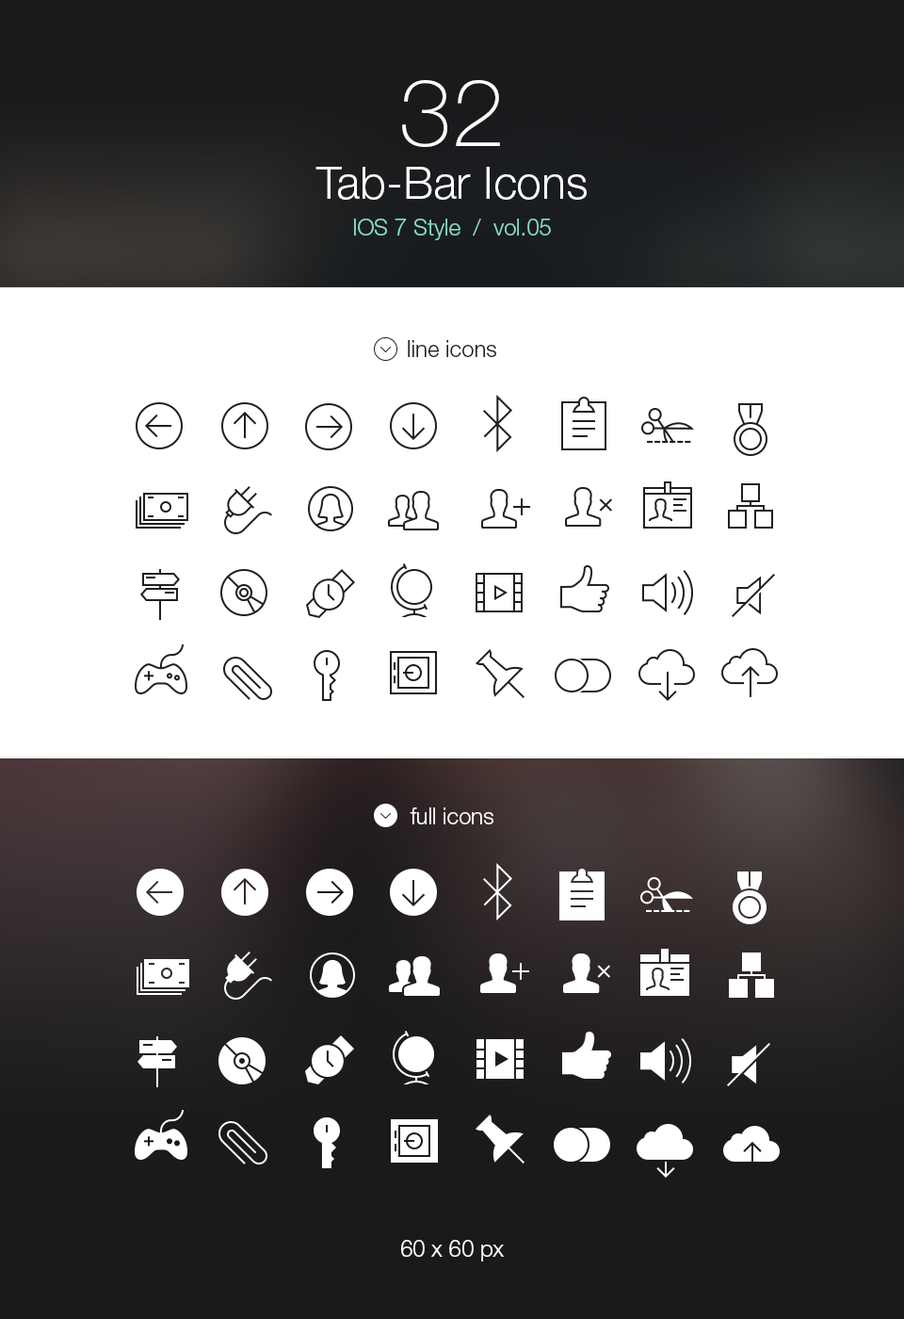
<style>
.page{position:relative;width:904px;height:1319px;background:#ffffff}
.page>*{position:absolute;margin:0}
.t1{font:22.6px/36.7px "HelveticaNeueLTStd-Lt";color:#85dac7}
.t2{font:94.2px/47.1px "HelveticaNeueLTStd-Th";color:#ffffff}
.t3{font:45.2px/52.7px "HelveticaNeueLTStd-Lt";color:#ffffff}
.t4{font:22.6px "HelveticaNeueLTStd-Lt";color:#1c2021}
.t5{font:22.6px "HelveticaNeueLTStd-Lt";color:#ffffff}
</style>
<div class="page">
<p class="t1" style="left:316px;top:80px;width:271px;height:160px;text-align:center"><span class="t2">32<br></span><span class="t3">Tab-Bar Icons<br></span>IOS 7 Style  /  vol.05</p>
<p class="t4" style="left:408px;top:340px;width:88px;height:17px">line icons</p>
<p class="t5" style="left:410px;top:807px;width:84px;height:17px">full icons</p>
<p class="t5" style="left:401px;top:1240px;width:103px;height:21px">60 x 60 px</p>
</div>
